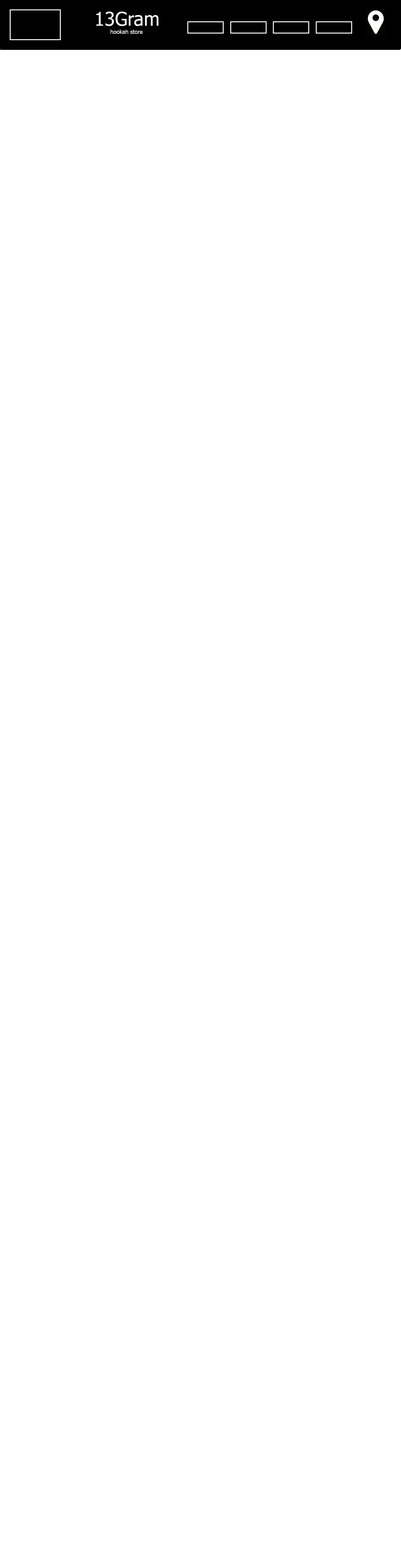
<style>
.page{position:relative;width:401px;height:1568px;background:#ffffff}
.page>*{position:absolute;margin:0}
.t1{font:18.8px "Tahoma";color:#ffffff}
.t2{font:5.6px "Tahoma";color:#ffffff}
</style>
<div class="page">
<p class="t1" style="left:96px;top:12px;width:63px;height:14px">13Gram</p>
<p class="t2" style="left:111px;top:29px;width:32px;height:5px">hookah store</p>
</div>
